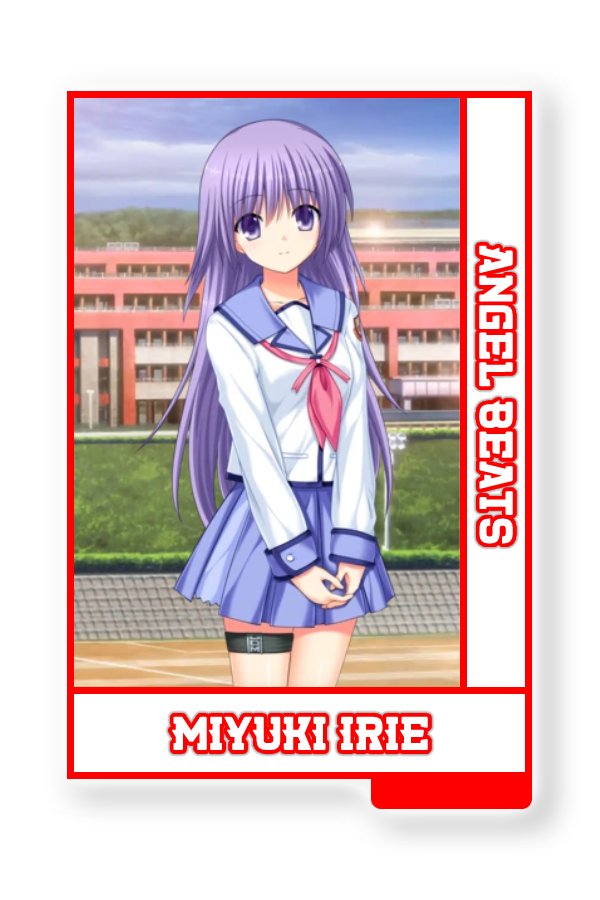
<style>
.page{position:relative;width:600px;height:900px;background:#ffffff}
.page>*{position:absolute;margin:0}
.t1{font:48.8px "KillerCollege";color:#ffffff}
.t2{font:48.6px "KillerCollege";color:#ffffff}
</style>
<div class="page">
<p class="t1" style="left:479px;top:245px;width:34px;height:299px;rotate:90deg">Angel Beats</p>
<p class="t2" style="left:171px;top:716px;width:257px;height:35px">MIYUKI IRIE</p>
</div>
